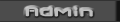
<style>
.page{position:relative;width:120px;height:22px;background:#4c4c4c}
.page>*{position:absolute;margin:0}
.t1{font:16px "Axaxaxregular";letter-spacing:0.01em;color:#bebebe;scale:1.5 1}
</style>
<div class="page">
<p class="t1" style="left:25px;top:7px;width:68px;height:10px">Admin</p>
</div>
